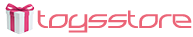
<style>
.page{position:relative;width:193px;height:37px;background:#ffffff}
.page>*{position:absolute;margin:0}
.t1{font:30px "Rounded";letter-spacing:-0.06em;color:#eb6477;scale:1.33 1}
</style>
<div class="page">
<p class="t1" style="left:37px;top:10px;width:155px;height:23px">toysstore</p>
</div>
